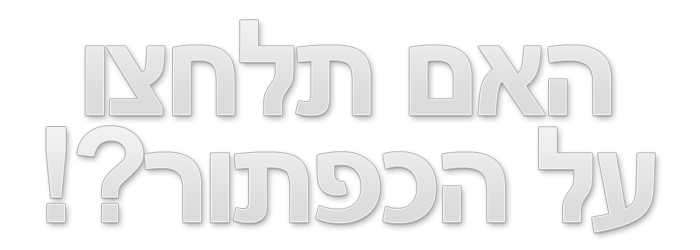
<style>
.page{position:relative;width:700px;height:250px;background:#ffffff}
.page>*{position:absolute;margin:0}
.t1{font:132.5px "Arial-BoldMT";letter-spacing:-0.05em;color:#e2e2e2;text-transform:uppercase;scale:0.96 1}
.t2{font:132.5px "Arial-BoldMT";letter-spacing:-0.05em;color:#e5e5e5;text-transform:uppercase;scale:0.96 1}
</style>
<div class="page">
<p class="t1" style="left:85px;top:20px;width:526px;height:96px">וצחלת םאה</p>
<p class="t2" style="left:46px;top:126px;width:609px;height:107px">!?רותפכה לע</p>
</div>
